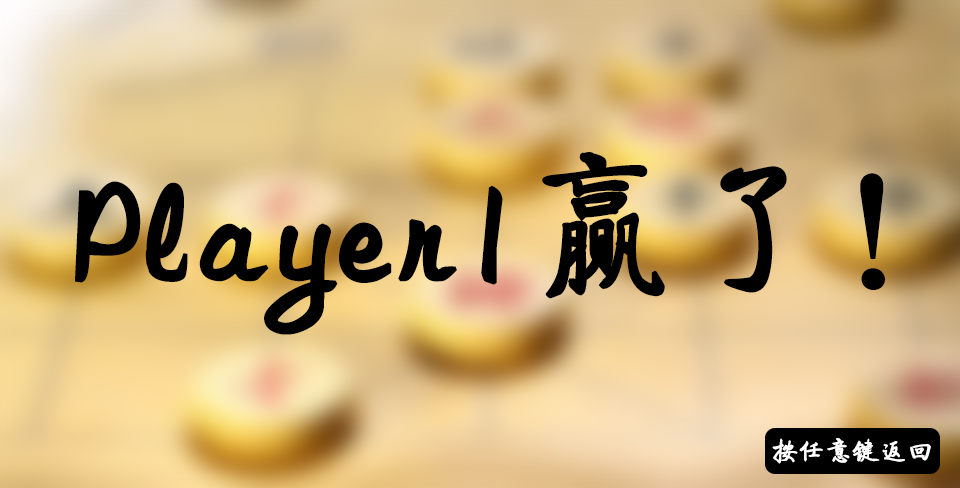
<style>
.page{position:relative;width:960px;height:488px}
.page>*{position:absolute;margin:0}
.t1{font:150px "FZQTJW--GB1-0";color:#000000;font-weight:bold}
.t2{font:26.5px "FZQTJW--GB1-0";color:#ffffff;font-weight:bold}
</style>
<div class="page">
<p class="t1" style="left:74px;top:152px;width:811px;height:183px">Player1赢了！</p>
<p class="t2" style="left:772px;top:438px;width:159px;height:26px">按任意键返回</p>
</div>
